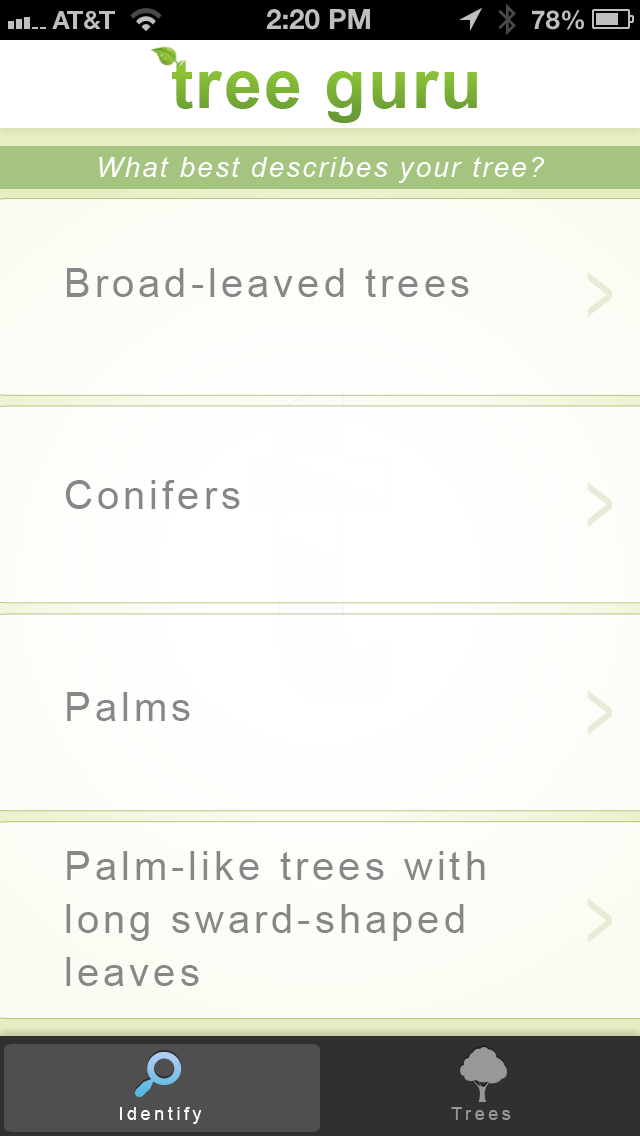
<style>
.page{position:relative;width:640px;height:1136px}
.page>*{position:absolute;margin:0}
.t1{font:68px "Arial-BoldMT";letter-spacing:0.03em;color:#7db136}
.t2{font:28px "Arial-ItalicMT";letter-spacing:0.075em;color:#ffffff}
.t3{font:40px/53px "ArialMT";letter-spacing:0.1em;color:#878787}
.t4{font:93.8px "ArialMT";letter-spacing:0.1em;color:#e8ecd7;scale:0.55 1}
.t5{font:18px "ArialMT";letter-spacing:0.2em;color:#ffffff}
.t6{font:18px "ArialMT";letter-spacing:0.2em;color:#989898}
</style>
<div class="page">
<p class="t1" style="left:172px;top:60px;width:305px;height:63px">tree guru</p>
<p class="t2" style="left:99px;top:157px;width:446px;height:26px">What best describes your tree?</p>
<p class="t3" style="left:66px;top:268px;width:419px;height:718px">Broad-leaved trees<br><br><br><br>Conifers<br><br><br><br>Palms<br><br><br>Palm-like trees with long sward-shaped leaves</p>
<p class="t4" style="left:587px;top:272px;width:25px;height:45px">&gt;</p>
<p class="t4" style="left:587px;top:482px;width:25px;height:45px">&gt;</p>
<p class="t4" style="left:587px;top:690px;width:25px;height:45px">&gt;</p>
<p class="t4" style="left:587px;top:898px;width:25px;height:45px">&gt;</p>
<p class="t5" style="left:120px;top:1107px;width:82px;height:17px">Identify</p>
<p class="t6" style="left:451px;top:1107px;width:60px;height:13px">Trees</p>
</div>
